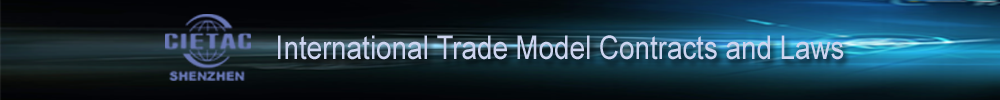
<style>
.page{position:relative;width:1000px;height:100px}
.page>*{position:absolute;margin:0}
.t1{font:32.8px "ArialMT";color:#cdd4ef;scale:0.85 1}
</style>
<div class="page">
<p class="t1" style="left:278px;top:35px;width:566px;height:25px">International Trade Model Contracts and Laws</p>
</div>
